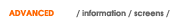
<style>
.page{position:relative;width:180px;height:25px;background:#ffffff}
.page>*{position:absolute;margin:0}
.t1{font:8px "Atlanta-Demi";color:#ff6600}
.t2{font:8px "Atlanta-Demi";color:#666666}
</style>
<div class="page">
<p class="t1" style="left:9px;top:9px;width:45px;height:8px">ADVANCED</p>
<p class="t2" style="left:76px;top:9px;width:94px;height:9px"><span class="t1"> </span>/ information / screens /</p>
</div>
